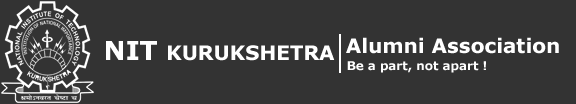
<style>
.page{position:relative;width:576px;height:104px;background:#333333}
.page>*{position:absolute;margin:0}
.t1{font:20px "Verdana-Bold";color:#ffffff}
.t2{font:26px "Verdana-Bold";color:#ffffff}
.t3{font:12px "Verdana-Bold";color:#ffffff}
</style>
<div class="page">
<p class="t1" style="left:106px;top:41px;width:229px;height:20px"><span class="t2">NIT </span>KURUKSHETRA</p>
<p class="t1" style="left:346px;top:37px;width:213px;height:17px">Alumni Association</p>
<p class="t3" style="left:347px;top:61px;width:139px;height:12px">Be a part, not apart !</p>
</div>
